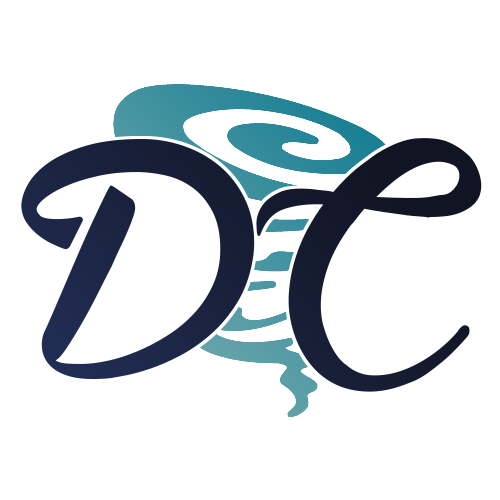
<style>
.page{position:relative;width:500px;height:500px;background:#ffffff}
.page>*{position:absolute;margin:0}
.t1{font:475.9px "Amontilladios";color:#171e36}
</style>
<div class="page">
<p class="t1" style="left:21px;top:138px;width:461px;height:254px">DC</p>
</div>
